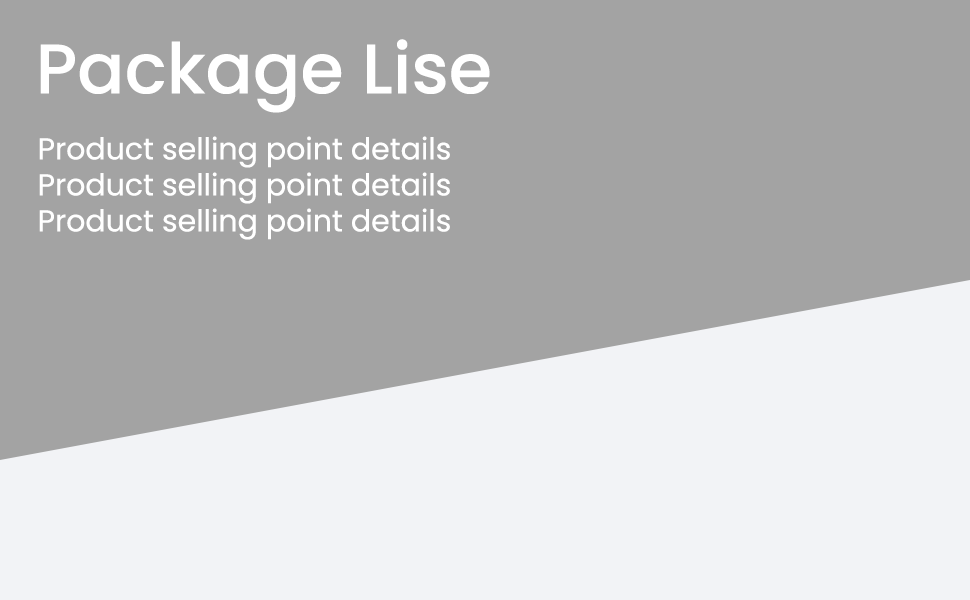
<style>
.page{position:relative;width:970px;height:600px;background:#a3a3a3}
.page>*{position:absolute;margin:0}
.t1{font:70px "Poppins-Medium";color:#ffffff}
.t2{font:30px "Poppins-Regular";color:#ffffff}
</style>
<div class="page">
<p class="t1" style="left:40px;top:39px;width:450px;height:74px">Package Lise</p>
<p class="t2" style="left:39px;top:136px;width:411px;height:104px">Product selling point details<br>Product selling point details<br>Product selling point details</p>
</div>
